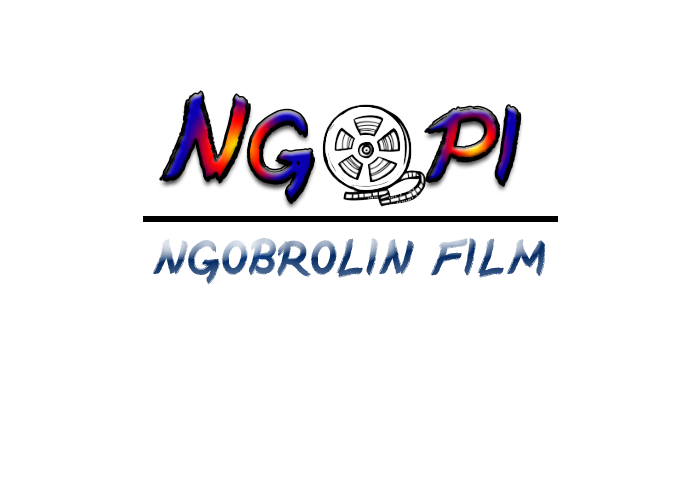
<style>
.page{position:relative;width:700px;height:500px;background:#ffffff}
.page>*{position:absolute;margin:0}
.t1{font:150px "MidNightRegular"}
.t2{font:72px "MidNightRegular"}
</style>
<div class="page">
<p class="t1" style="left:160px;top:91px;width:154px;height:112px">Ng</p>
<p class="t1" style="left:425px;top:105px;width:95px;height:81px">pi</p>
<p class="t2" style="left:152px;top:238px;width:394px;height:47px">ngobrolin film</p>
</div>
